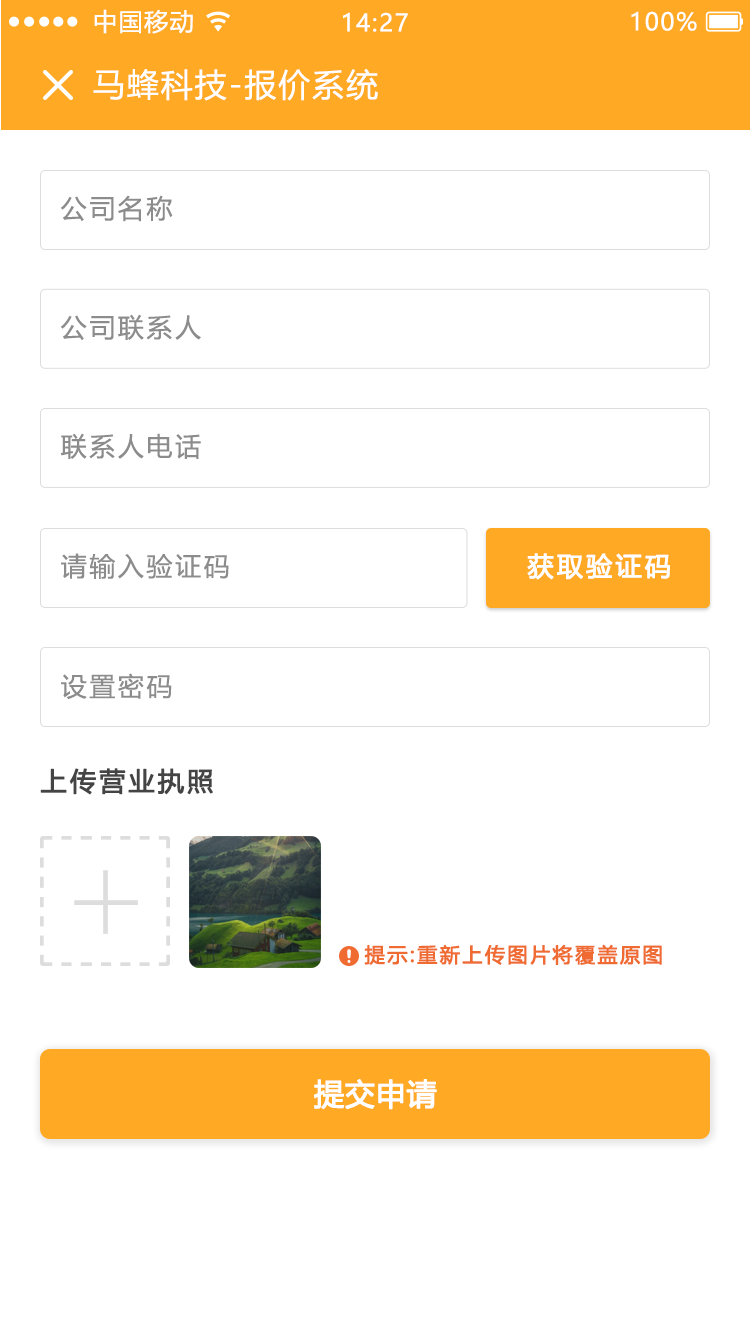
<style>
.page{position:relative;width:750px;height:1334px;background:#ffffff}
.page>*{position:absolute;margin:0}
.t1{font:24px "MicrosoftYaHeiUI";letter-spacing:0.06em;color:#ffffff}
.t2{font:32px "MicrosoftYaHeiUI";letter-spacing:0.06em;color:#ffffff}
.t3{font:26px "MicrosoftYaHeiUI";letter-spacing:0.1em;color:#8c8c8c}
.t4{font:26px "MicrosoftYaHeiUI";letter-spacing:0.1em;color:#ffffff;font-weight:bold}
.t5{font:26px "MicrosoftYaHeiUI";letter-spacing:0.1em;color:#444444;font-weight:bold}
.t6{font:20px "MicrosoftYaHeiUI";letter-spacing:0.1em;color:#ef6b31;font-weight:bold}
.t7{font:30px "MicrosoftYaHeiUI";color:#ffffff;font-weight:bold}
</style>
<div class="page">
<p class="t1" style="left:94px;top:9px;width:99px;height:25px">中国移动</p>
<p class="t1" style="left:343px;top:12px;width:65px;height:20px">14:27</p>
<p class="t1" style="left:631px;top:11px;width:66px;height:20px">100%</p>
<p class="t2" style="left:93px;top:68px;width:285px;height:33px">马蜂科技-报价系统</p>
<p class="t3" style="left:60px;top:195px;width:113px;height:27px">公司名称</p>
<p class="t3" style="left:60px;top:314px;width:141px;height:26px">公司联系人</p>
<p class="t3" style="left:60px;top:433px;width:141px;height:26px">联系人电话</p>
<p class="t3" style="left:61px;top:553px;width:168px;height:26px">请输入验证码</p>
<p class="t4" style="left:527px;top:553px;width:143px;height:27px">获取验证码</p>
<p class="t3" style="left:61px;top:673px;width:111px;height:26px">设置密码</p>
<p class="t5" style="left:40px;top:768px;width:173px;height:27px">上传营业执照</p>
<p class="t6" style="left:364px;top:944px;width:298px;height:21px">提示:重新上传图片将覆盖原图</p>
<p class="t7" style="left:314px;top:1079px;width:123px;height:31px">提交申请</p>
</div>
